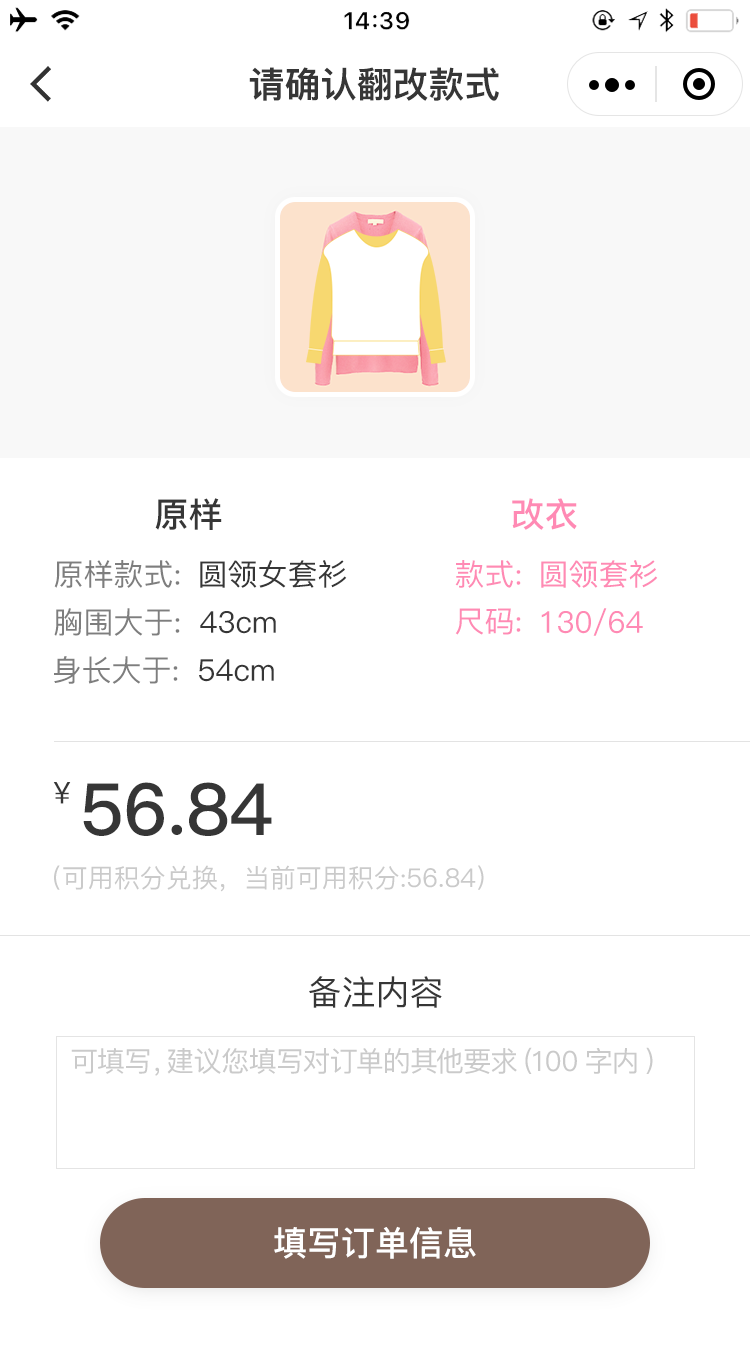
<style>
.page{position:relative;width:750px;height:1368px;background:#ffffff}
.page>*{position:absolute;margin:0}
.t1{font:36px "PingFang-SC-Heavy";color:#363636}
.t2{font:34px "PingFang-SC-Bold";color:#363636}
.t3{font:34px "PingFang-SC-Bold";color:#ff8ab4}
.t4{font:30px "PingFang-SC-Medium";color:#7e7e7e}
.t5{font:30px "PingFang-SC-Medium";color:#363636}
.t6{font:30px "PingFang-SC-Medium";color:#ff8ab4}
.t7{font:72px "PingFang-SC-Bold";color:#363636}
.t8{font:26px "PingFang-SC-Medium";color:#cacaca}
.t9{font:34px "PingFang-SC-Medium";color:#363636}
.t10{font:28px "PingFang-SC-Medium";color:#cacaca}
.t11{font:34px "PingFang-SC-Bold";color:#ffffff}
</style>
<div class="page">
<p class="t1" style="left:249px;top:67px;width:250px;height:34px">请确认翻改款式</p>
<p class="t2" style="left:155px;top:498px;width:67px;height:32px">原样</p>
<p class="t3" style="left:512px;top:498px;width:65px;height:32px">改衣</p>
<p class="t4" style="left:54px;top:560px;width:126px;height:28px">原样款式:</p>
<p class="t5" style="left:200px;top:560px;width:147px;height:28px">圆领女套衫</p>
<p class="t6" style="left:455px;top:560px;width:66px;height:28px">款式:</p>
<p class="t6" style="left:541px;top:560px;width:117px;height:28px">圆领套衫</p>
<p class="t4" style="left:54px;top:608px;width:126px;height:28px">胸围大于:</p>
<p class="t5" style="left:200px;top:611px;width:76px;height:23px">43cm</p>
<p class="t6" style="left:455px;top:608px;width:66px;height:27px">尺码:</p>
<p class="t6" style="left:541px;top:608px;width:102px;height:28px">130/64</p>
<p class="t4" style="left:54px;top:656px;width:124px;height:28px">身长大于:</p>
<p class="t5" style="left:199px;top:659px;width:75px;height:23px">54cm</p>
<p class="t5" style="left:53px;top:782px;width:18px;height:22px">￥</p>
<p class="t7" style="left:83px;top:782px;width:189px;height:54px">56.84</p>
<p class="t8" style="left:54px;top:865px;width:430px;height:27px">（可用积分兑换，当前可用积分:56.84）</p>
<p class="t9" style="left:309px;top:976px;width:133px;height:32px">备注内容</p>
<p class="t10" style="left:71px;top:1047px;width:582px;height:29px">可填写，建议您填写对订单的其他要求(100字内)</p>
<p class="t11" style="left:274px;top:1226px;width:202px;height:33px">填写订单信息</p>
</div>
